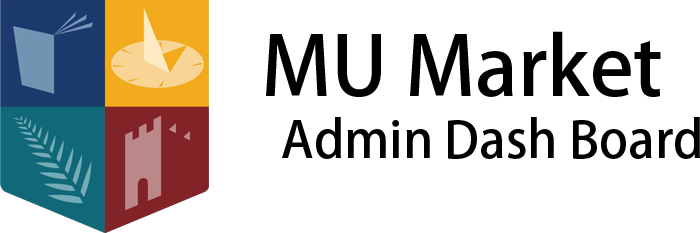
<style>
.page{position:relative;width:700px;height:233px;background:#ffffff}
.page>*{position:absolute;margin:0}
.t1{font:19.3px "AdobeHeitiStd-Regular";color:#000000}
.t2{font:12px "AdobeHeitiStd-Regular";color:#000000}
</style>
<div class="page">
<p class="t1" style="left:266px;top:31px;width:395px;height:66px">MU Market</p>
<p class="t2" style="left:282px;top:117px;width:418px;height:42px">Admin Dash Board</p>
</div>
